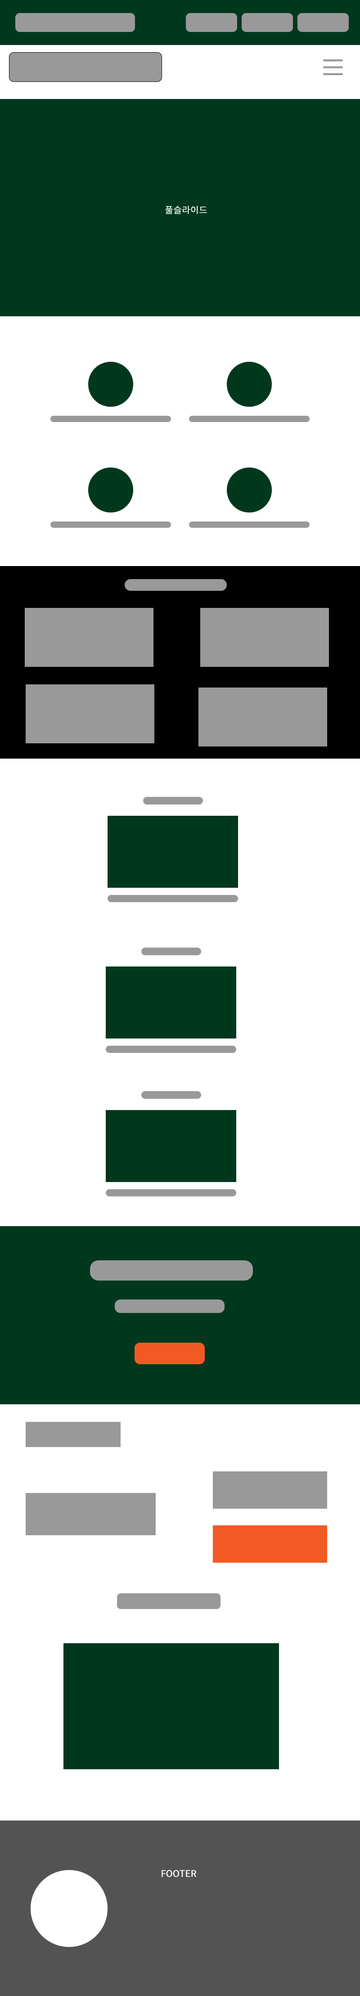
<style>
.page{position:relative;width:360px;height:1996px;background:#ffffff}
.page>*{position:absolute;margin:0}
.t1{font:9px "NotoSansKR-Regular";color:#ffffff;font-weight:bold}
</style>
<div class="page">
<p class="t1" style="left:165px;top:206px;width:42px;height:8px">풀슬라이드</p>
<p class="t1" style="left:162px;top:1870px;width:35px;height:7px">FOOTER</p>
</div>
